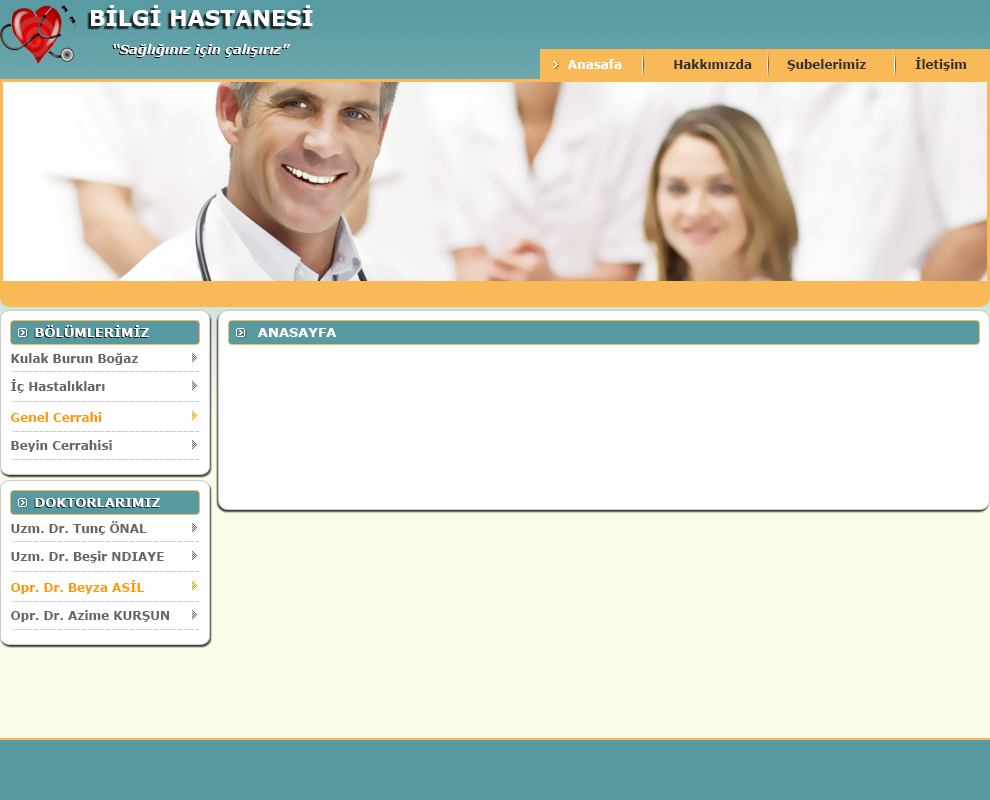
<style>
.page{position:relative;width:990px;height:800px;background:#ffffff}
.page>*{position:absolute;margin:0}
.t1{font:22px "Verdana-Bold";color:#ffffff}
.t2{font:13px "Verdana-BoldItalic";color:#ffffff}
.t3{font:12px "Verdana-Bold";color:#ffffff}
.t4{font:12px "Verdana-Bold";color:#333333}
.t5{font:13px "Verdana-Bold";color:#ffffff}
.t6{font:12px "Verdana-Bold";color:#666666}
.t7{font:12px "Verdana-Bold";color:#ff9900}
</style>
<div class="page">
<p class="t1" style="left:91px;top:5px;width:222px;height:21px">BİLGİ HASTANESİ</p>
<p class="t2" style="left:113px;top:44px;width:178px;height:13px">“Sağlığınız için çalışırız”</p>
<p class="t3" style="left:567px;top:59px;width:55px;height:10px">Anasafa</p>
<p class="t4" style="left:674px;top:59px;width:78px;height:10px">Hakkımızda</p>
<p class="t4" style="left:787px;top:59px;width:79px;height:12px">Şubelerimiz</p>
<p class="t4" style="left:915px;top:57px;width:52px;height:14px">İletişim</p>
<p class="t5" style="left:35px;top:325px;width:114px;height:12px">BÖLÜMLERİMİZ</p>
<p class="t5" style="left:257px;top:328px;width:80px;height:9px">ANASAYFA</p>
<p class="t6" style="left:11px;top:353px;width:127px;height:12px">Kulak Burun Boğaz</p>
<p class="t6" style="left:11px;top:379px;width:94px;height:14px">İç Hastalıkları</p>
<p class="t7" style="left:11px;top:412px;width:91px;height:10px">Genel Cerrahi</p>
<p class="t6" style="left:11px;top:440px;width:101px;height:12px">Beyin Cerrahisi</p>
<p class="t5" style="left:35px;top:498px;width:125px;height:9px">DOKTORLARIMIZ</p>
<p class="t6" style="left:11px;top:521px;width:136px;height:14px">Uzm. Dr. Tunç ÖNAL</p>
<p class="t6" style="left:11px;top:551px;width:153px;height:12px">Uzm. Dr. Beşir NDIAYE</p>
<p class="t7" style="left:11px;top:580px;width:133px;height:14px">Opr. Dr. Beyza ASİL</p>
<p class="t6" style="left:11px;top:610px;width:159px;height:12px">Opr. Dr. Azime KURŞUN</p>
</div>
